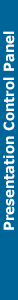
<style>
.page{position:relative;width:18px;height:300px;background:#006699}
.page>*{position:absolute;margin:0}
.t1{font:14px "Verdana-Bold";color:#ffffff;scale:0.95 1}
</style>
<div class="page">
<p class="t1" style="left:3px;top:31px;width:12px;height:199px;rotate:-90deg">Presentation Control Panel</p>
</div>
